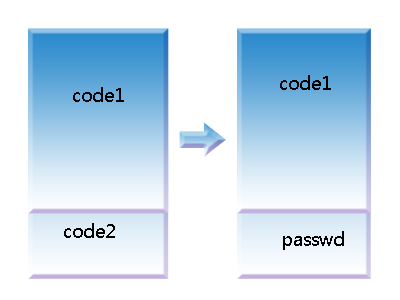
<style>
.page{position:relative;width:400px;height:300px;background:#ffffff}
.page>*{position:absolute;margin:0}
.t1{font:18px "MicrosoftYaHei";color:#010101}
.t2{font:18px "MicrosoftYaHei";color:#030303}
</style>
<div class="page">
<p class="t1" style="left:280px;top:75px;width:51px;height:15px">code1</p>
<p class="t2" style="left:73px;top:87px;width:51px;height:15px">code1</p>
<p class="t1" style="left:64px;top:223px;width:51px;height:15px">code2</p>
<p class="t1" style="left:283px;top:231px;width:61px;height:19px">passwd</p>
</div>
